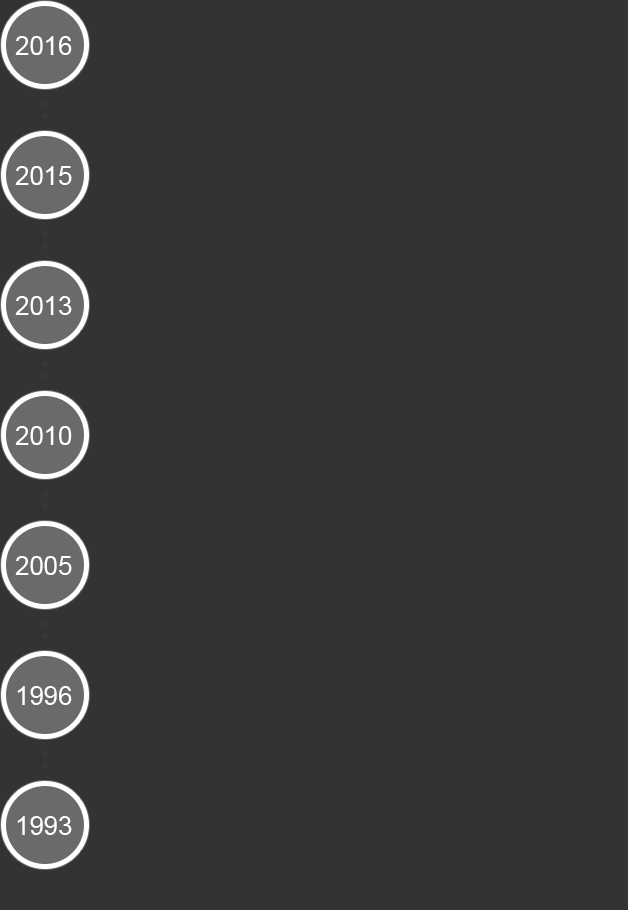
<style>
.page{position:relative;width:628px;height:910px;background:#333333}
.page>*{position:absolute;margin:0}
.t1{font:25.7px "ArialMT";color:#ffffff}
</style>
<div class="page">
<p class="t1" style="left:15px;top:36px;width:57px;height:19px">2016</p>
<p class="t1" style="left:15px;top:166px;width:57px;height:19px">2015</p>
<p class="t1" style="left:15px;top:296px;width:57px;height:19px">2013</p>
<p class="t1" style="left:15px;top:426px;width:57px;height:19px">2010</p>
<p class="t1" style="left:15px;top:556px;width:57px;height:19px">2005</p>
<p class="t1" style="left:17px;top:686px;width:55px;height:19px">1996</p>
<p class="t1" style="left:17px;top:816px;width:55px;height:19px">1993</p>
</div>
